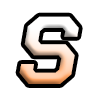
<style>
.page{position:relative;width:100px;height:100px;background:#ffffff}
.page>*{position:absolute;margin:0}
.t1{font:96px "ChakraPetch-BoldItalic"}
</style>
<div class="page">
<p class="t1" style="left:19px;top:16px;width:60px;height:68px">S</p>
</div>
